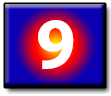
<style>
.page{position:relative;width:111px;height:96px}
.page>*{position:absolute;margin:0}
.t1{font:72px "MyriadPro-Bold";color:#ffffff}
</style>
<div class="page">
<p class="t1" style="left:38px;top:20px;width:36px;height:49px">9</p>
</div>
